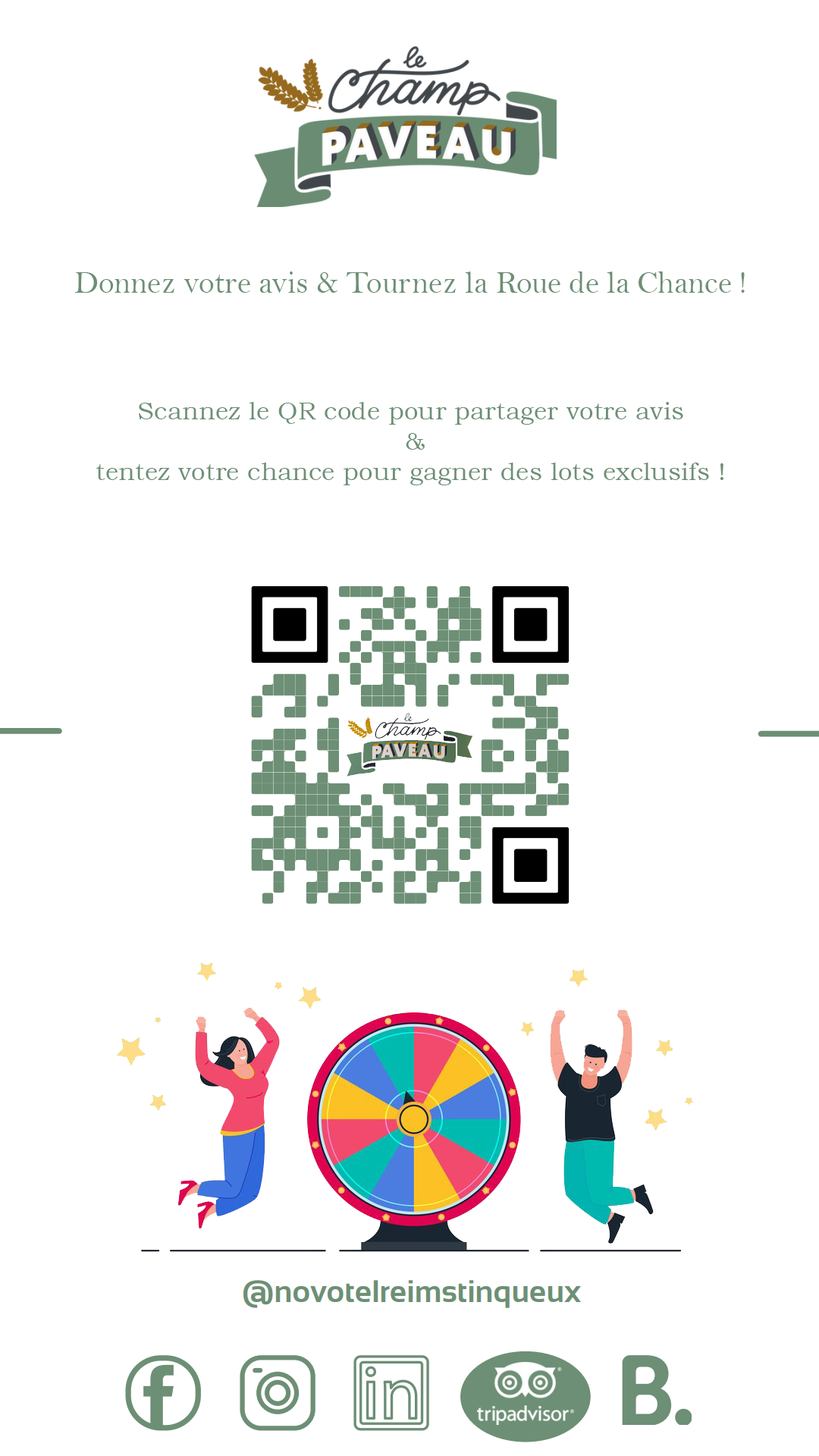
<style>
.page{position:relative;width:819px;height:1456px;background:#ffffff}
.page>*{position:absolute;margin:0}
.t1{font:31.6px "BellMT";color:#6d8f75}
.t2{font:25.3px "BookmanOldStyle";color:#6d8f75}
</style>
<div class="page">
<p class="t1" style="left:74px;top:271px;width:671px;height:22px">Donnez votre avis &amp; Tournez la Roue de la Chance !</p>
<p class="t2" style="left:96px;top:402px;width:627px;height:83px;text-align:center">Scannez le QR code pour partager votre avis <br>&amp;<br>tentez votre chance pour gagner des lots exclusifs !</p>
</div>
